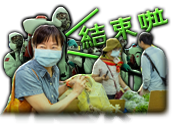
<style>
.page{position:relative;width:174px;height:140px;background:#ffffff}
.page>*{position:absolute;margin:0}
.t1{font:31.3px "FZZJ-MSHLFW"}
</style>
<div class="page">
<p class="t1" style="left:78px;top:8px;width:90px;height:42px;rotate:-14deg">结束啦</p>
</div>
